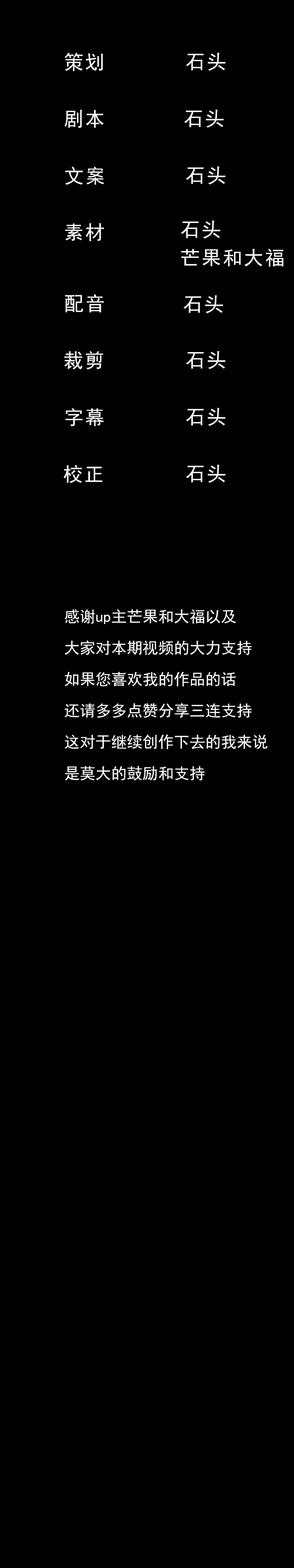
<style>
.page{position:relative;width:294px;height:1568px;background:#000000}
.page>*{position:absolute;margin:0}
.t1{font:19.6px "SimHei";letter-spacing:0.08em;color:#ffffff}
.t2{font:19.6px/28.2px "SimHei";letter-spacing:0.08em;color:#ffffff}
.t3{font:15.7px/31.4px "SimHei";color:#ffffff}
</style>
<div class="page">
<p class="t1" style="left:65px;top:53px;width:38px;height:18px">策划</p>
<p class="t1" style="left:186px;top:53px;width:39px;height:18px">石头</p>
<p class="t1" style="left:64px;top:110px;width:40px;height:18px">剧本</p>
<p class="t1" style="left:184px;top:109px;width:40px;height:19px">石头</p>
<p class="t1" style="left:65px;top:166px;width:39px;height:19px">文案</p>
<p class="t1" style="left:186px;top:166px;width:39px;height:19px">石头</p>
<p class="t2" style="left:181px;top:220px;width:102px;height:47px">石头 <br>芒果和大福</p>
<p class="t1" style="left:65px;top:223px;width:39px;height:18px">素材</p>
<p class="t1" style="left:65px;top:294px;width:39px;height:18px">配音</p>
<p class="t1" style="left:183px;top:295px;width:40px;height:19px">石头</p>
<p class="t1" style="left:64px;top:351px;width:39px;height:19px">裁剪</p>
<p class="t1" style="left:186px;top:351px;width:39px;height:18px">石头</p>
<p class="t1" style="left:65px;top:408px;width:39px;height:18px">字幕</p>
<p class="t1" style="left:186px;top:408px;width:39px;height:18px">石头</p>
<p class="t1" style="left:64px;top:465px;width:38px;height:18px">校正</p>
<p class="t1" style="left:186px;top:465px;width:39px;height:18px">石头</p>
<p class="t3" style="left:65px;top:609px;width:203px;height:171px">感谢up主芒果和大福以及<br>大家对本期视频的大力支持<br>如果您喜欢我的作品的话<br>还请多多点赞分享三连支持<br>这对于继续创作下去的我来说<br>是莫大的鼓励和支持</p>
</div>
